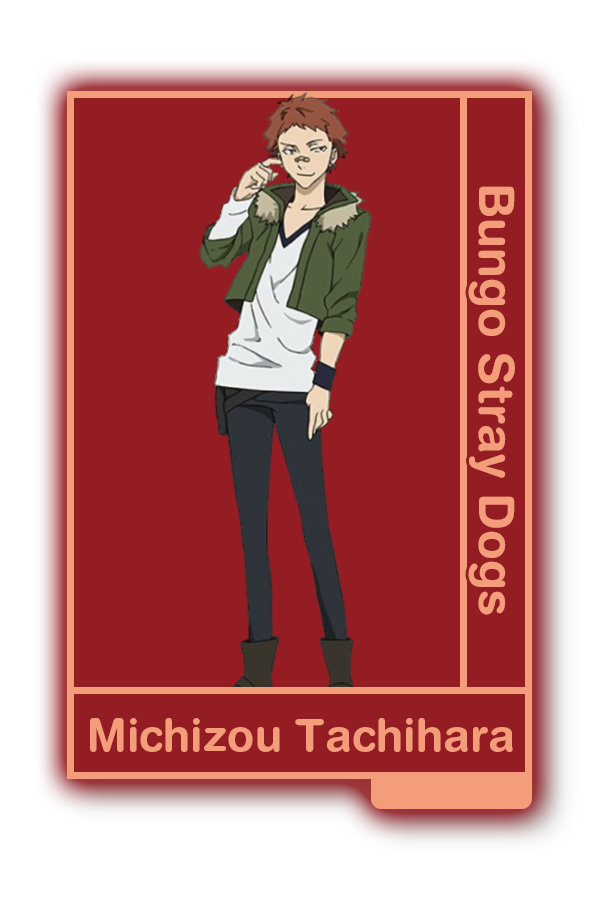
<style>
.page{position:relative;width:600px;height:900px;background:#941d23}
.page>*{position:absolute;margin:0}
.t1{font:48.8px "HelveticaRounded-Bold";color:#f39d7b}
.t2{font:44.5px "HelveticaRounded-Bold";color:#f39d7b}
</style>
<div class="page">
<p class="t1" style="left:468px;top:186px;width:47px;height:429px;rotate:90deg">Bungo Stray Dogs</p>
<p class="t2" style="left:90px;top:718px;width:423px;height:34px">Michizou Tachihara</p>
</div>
